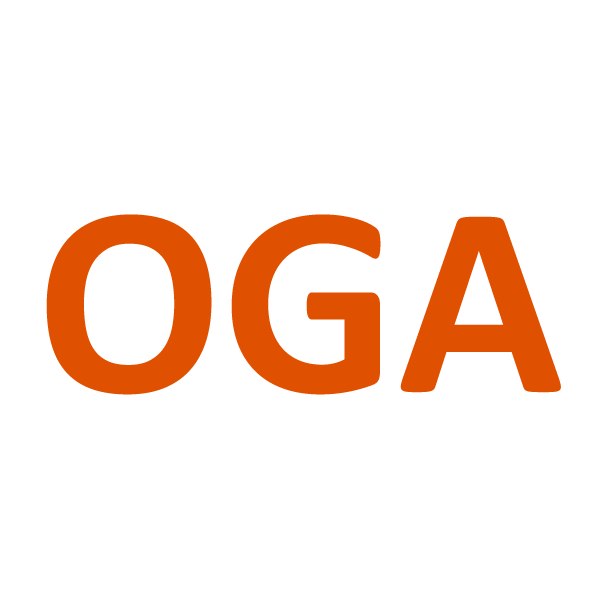
<style>
.page{position:relative;width:600px;height:600px;background:#ffffff}
.page>*{position:absolute;margin:0}
.t1{font:275px "Calibri-Bold";color:#e05001}
</style>
<div class="page">
<p class="t1" style="left:46px;top:214px;width:515px;height:181px">OGA</p>
</div>
